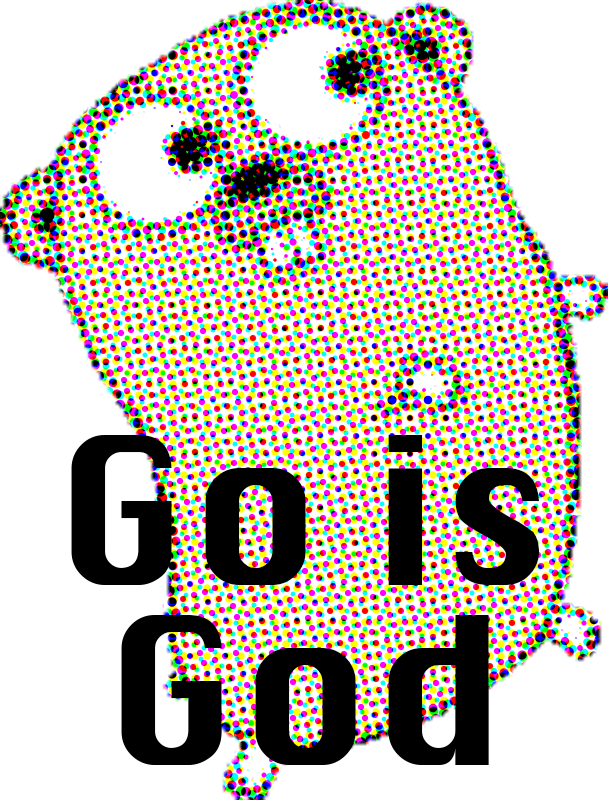
<style>
.page{position:relative;width:608px;height:800px;background:#ffffff}
.page>*{position:absolute;margin:0}
.t1{font:200px/180px "Silom";color:#000000}
</style>
<div class="page">
<p class="t1" style="left:71px;top:435px;width:468px;height:330px;text-align:center">Go is<br>God</p>
</div>
